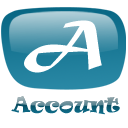
<style>
.page{position:relative;width:128px;height:128px;background:#ffffff}
.page>*{position:absolute;margin:0}
.t1{font:60px "MaturaMTScriptCapitals";color:#ffffff}
.t2{font:20px "Ravie"}
</style>
<div class="page">
<p class="t1" style="left:24px;top:20px;width:78px;height:53px">A</p>
<p class="t2" style="left:11px;top:96px;width:109px;height:19px">Account</p>
</div>
